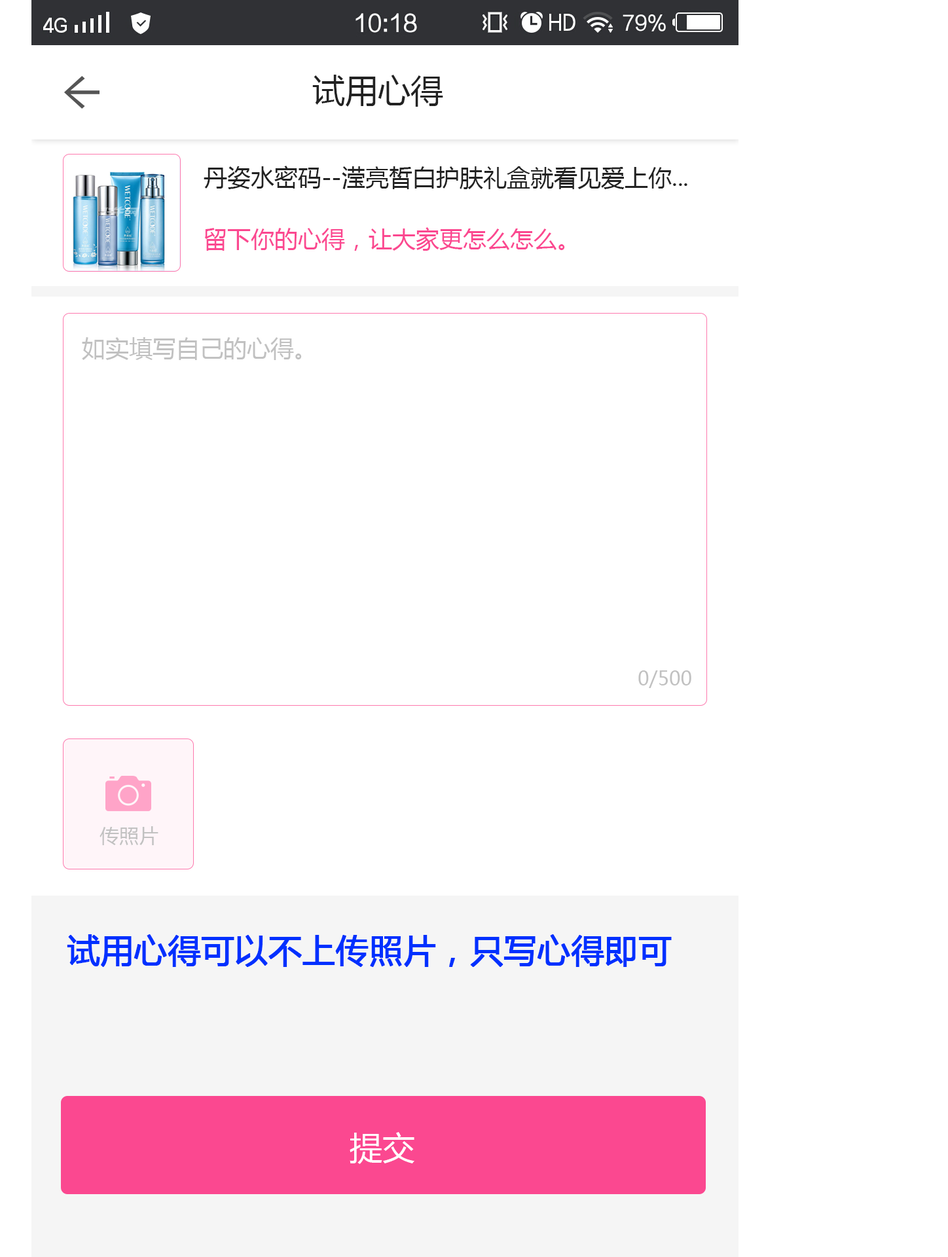
<style>
.page{position:relative;width:948px;height:1257px;background:#ffffff}
.page>*{position:absolute;margin:0}
.t1{font:32.7px "MicrosoftYaHei";color:#222222}
.t2{font:23.6px "MicrosoftYaHei";color:#222222}
.t3{font:23.6px "MicrosoftYaHei";color:#fb4890}
.t4{font:23.6px "MicrosoftYaHei";color:#c1c1c1}
.t5{font:19.6px "MicrosoftYaHei";color:#c1c1c1}
.t6{font:32.7px "MicrosoftYaHei";color:#0030ff;font-weight:bold}
.t7{font:32.7px "MicrosoftYaHei";color:#ffffff}
</style>
<div class="page">
<p class="t1" style="left:312px;top:75px;width:131px;height:32px">试用心得</p>
<p class="t2" style="left:204px;top:166px;width:484px;height:23px">丹姿水密码--滢亮皙白护肤礼盒就看见爱上你...</p>
<p class="t3" style="left:204px;top:227px;width:361px;height:24px">留下你的心得，让大家更怎么怎么。</p>
<p class="t4" style="left:82px;top:337px;width:220px;height:23px">如实填写自己的心得。</p>
<p class="t5" style="left:639px;top:671px;width:53px;height:17px">0/500</p>
<p class="t5" style="left:100px;top:826px;width:58px;height:19px">传照片</p>
<p class="t6" style="left:67px;top:935px;width:605px;height:32px">试用心得可以不上传照片，只写心得即可</p>
<p class="t7" style="left:350px;top:1132px;width:65px;height:32px">提交</p>
</div>
